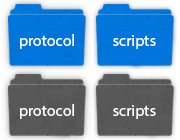
<style>
.page{position:relative;width:180px;height:140px}
.page>*{position:absolute;margin:0}
.t1{font:16px "MyriadPro-Regular";color:#ffffff}
</style>
<div class="page">
<p class="t1" style="left:20px;top:34px;width:54px;height:15px">protocol</p>
<p class="t1" style="left:113px;top:35px;width:43px;height:14px">scripts</p>
<p class="t1" style="left:20px;top:104px;width:54px;height:15px">protocol</p>
<p class="t1" style="left:113px;top:105px;width:43px;height:14px">scripts</p>
</div>
